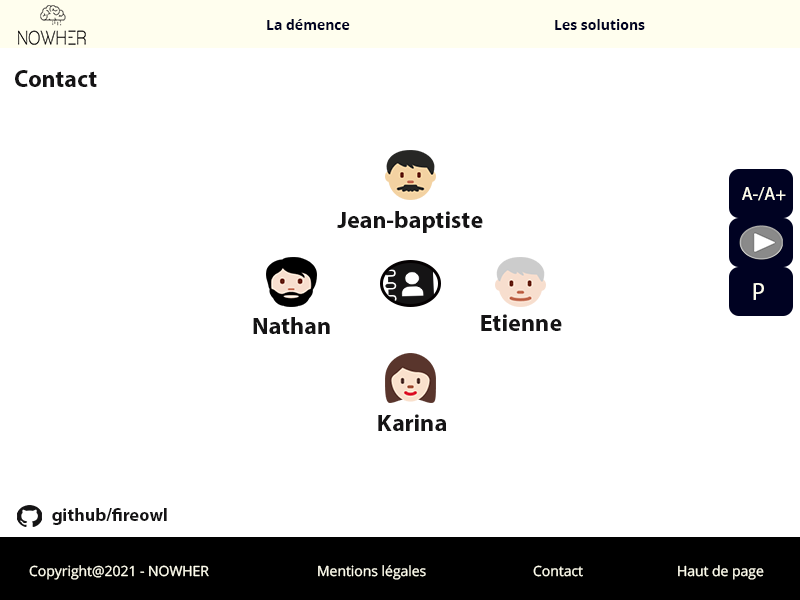
<style>
.page{position:relative;width:800px;height:600px;background:#ffffff}
.page>*{position:absolute;margin:0}
.t1{font:14px "OpenSans-Bold";color:#000222}
.t2{font:12px "MyriadPro-Regular";color:#000222}
.t3{font:24px "MyriadPro-Bold";color:#151415}
.t4{font:18px "MyriadPro-Regular";color:#fffeee}
.t5{font:23.9px "MyriadPro-Bold";color:#151415}
.t6{font:24px "MyriadPro-Regular";color:#fffeee}
.t7{font:18px "MyriadPro-Bold";color:#151415}
.t8{font:14px "OpenSans-Regular";color:#fffeee}
.t9{font:12.1px "MyriadPro-Regular";color:#fffeee}
</style>
<div class="page">
<p class="t1" style="left:267px;top:19px;width:378px;height:11px"><span class="t2"><br>                                                </span>La démence      Les solutions</p>
<p class="t3" style="left:15px;top:70px;width:82px;height:17px">Contact</p>
<p class="t4" style="left:742px;top:187px;width:44px;height:14px">A-/A+</p>
<p class="t5" style="left:337px;top:211px;width:146px;height:22px">Jean-baptiste</p>
<p class="t6" style="left:753px;top:283px;width:11px;height:17px">P</p>
<p class="t5" style="left:253px;top:317px;width:77px;height:17px">Nathan</p>
<p class="t5" style="left:481px;top:314px;width:81px;height:17px">Etienne</p>
<p class="t5" style="left:378px;top:414px;width:69px;height:17px">Karina</p>
<p class="t7" style="left:52px;top:508px;width:115px;height:17px">github/fireowl</p>
<p class="t8" style="left:29px;top:565px;width:735px;height:15px"><span class="t9"><br><br><br><br>  </span>Copyright@2021 - NOWHER    Mentions légales    Contact    Haut de page</p>
</div>
